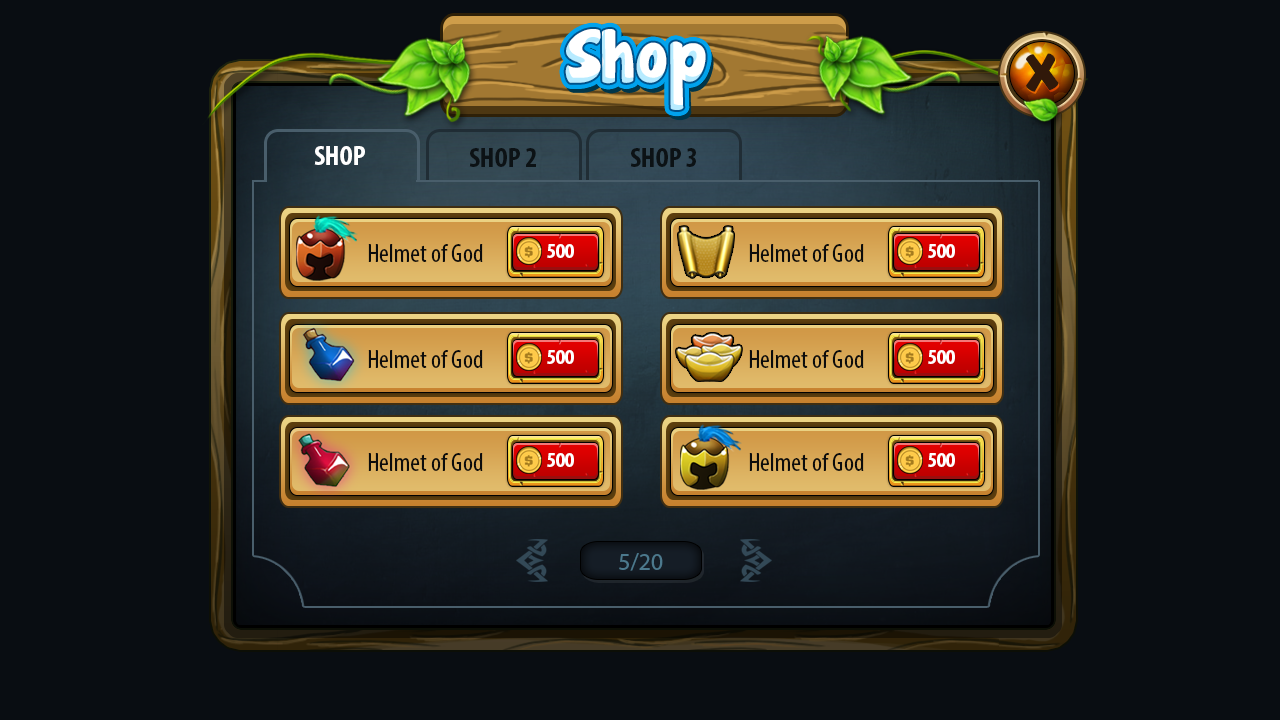
<style>
.page{position:relative;width:1280px;height:720px;background:#090d12}
.page>*{position:absolute;margin:0}
.t1{font:67.7px "JandaManateeSolid";color:#ffffff}
.t2{font:46.1px "JandaManateeSolid";color:#31190a}
.t3{font:28px "MyriadPro-BoldCond";color:#ffffff;text-transform:uppercase}
.t4{font:28px "MyriadPro-BoldCond";color:#0c1215;text-transform:uppercase}
.t5{font:26.5px "MyriadPro-Cond";color:#0c0c0c}
.t6{font:21.6px "MyriadPro-BoldCond";color:#ffffff;text-transform:uppercase}
.t7{font:24px "MyriadPro-Regular";color:#4c798d}
</style>
<div class="page">
<p class="t1" style="left:565px;top:29px;width:141px;height:81px">Shop</p>
<p class="t2" style="left:1026px;top:53px;width:33px;height:39px">X</p>
<p class="t3" style="left:314px;top:146px;width:51px;height:19px">Shop</p>
<p class="t4" style="left:469px;top:148px;width:67px;height:19px">Shop 2</p>
<p class="t4" style="left:630px;top:148px;width:66px;height:19px">Shop 3</p>
<p class="t5" style="left:368px;top:244px;width:115px;height:18px">Helmet of God</p>
<p class="t6" style="left:547px;top:244px;width:27px;height:14px">500</p>
<p class="t7" style="left:619px;top:553px;width:44px;height:18px">5/20</p>
</div>
